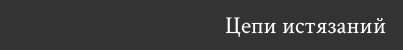
<style>
.page{position:relative;width:403px;height:50px;background:#333333}
.page>*{position:absolute;margin:0}
.t1{font:24px "CrimsonText-Regular";color:#ffffff}
</style>
<div class="page">
<p class="t1" style="left:226px;top:17px;width:160px;height:20px">Цепи истязаний</p>
</div>
